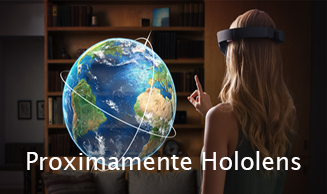
<style>
.page{position:relative;width:327px;height:194px}
.page>*{position:absolute;margin:0}
.t1{font:24px "LucidaSans";color:#fefcfc}
</style>
<div class="page">
<p class="t1" style="left:27px;top:151px;width:274px;height:19px">Proximamente Hololens</p>
</div>
